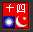
<style>
.page{position:relative;width:33px;height:32px;background:#f20000}
.page>*{position:absolute;margin:0}
.t1{font:10.4px "SimSun";color:#ffffff}
</style>
<div class="page">
<p class="t1" style="left:6px;top:4px;width:19px;height:9px">十四</p>
</div>
